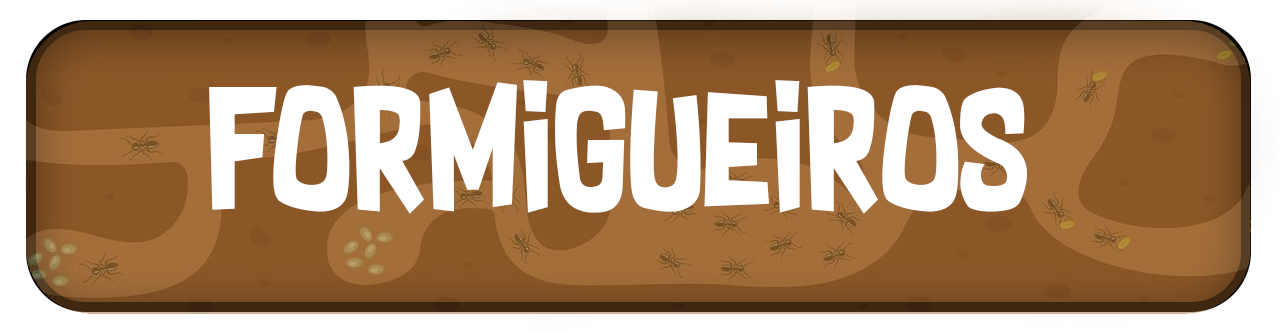
<style>
.page{position:relative;width:1280px;height:333px;background:#ffffff}
.page>*{position:absolute;margin:0}
.t1{font:140.7px "SupersonicRocketship";color:#ffffff}
</style>
<div class="page">
<p class="t1" style="left:209px;top:80px;width:818px;height:134px">Formigueiros</p>
</div>
